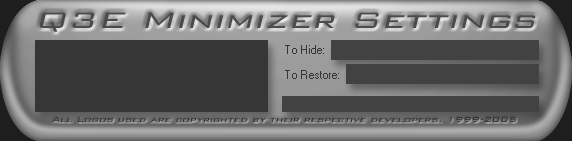
<style>
.page{position:relative;width:572px;height:141px;background:#363636}
.page>*{position:absolute;margin:0}
.t1{font:30.3px "BankGothicBT-Light";color:#4b4b4b;font-style:italic;scale:1.31 1}
.t2{font:9.7px "BankGothicBT-Light";color:#2f2e2e;font-style:italic;scale:1.14 1}
</style>
<div class="page">
<p class="t1" style="left:39px;top:12px;width:497px;height:20px">Q3E Minimizer Settings</p>
<p class="t2" style="left:52px;top:117px;width:464px;height:5px">All Logos used are copyrighted by their respective developers. 1999-2005</p>
</div>
